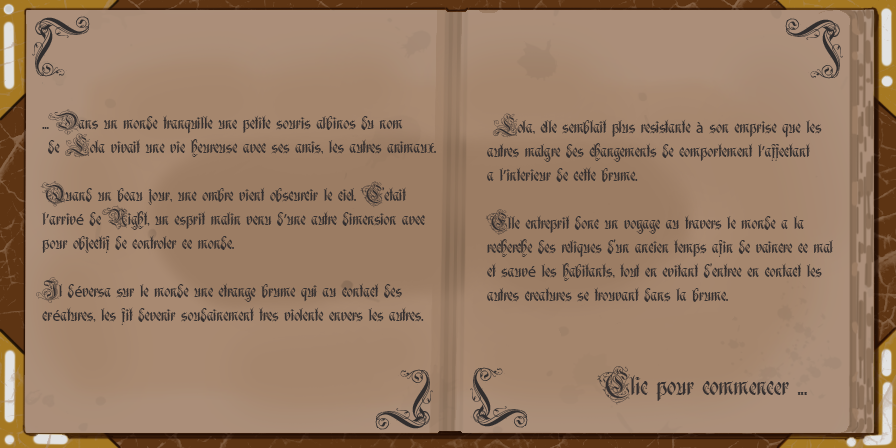
<style>
.page{position:relative;width:896px;height:448px}
.page>*{position:absolute;margin:0}
.t1{font:16px/24px "Ruritania";color:#353030}
.t2{font:16px/24px "MyriadPro-Regular";color:#353030}
.t3{font:24px "Ruritania";color:#353030}
</style>
<div class="page">
<p class="t1" style="left:36px;top:109px;width:400px;height:216px">... Dans un monde tranquille une petite souris albinos du nom<br> de Lola vivait une vie heureuse avec ses amis, les autres animaux.<br><br>Quand un beau jour, une ombre vient obscurcir le ciel. C'etait<br>l<span class="t2">’</span>arriv<span class="t2">é</span> de Night, un esprit malin venu d<span class="t2">’</span>une autre dimension avec <br>pour objectif de controler ce monde. <br><br>Il d<span class="t2">é</span>versa sur le monde une etrange brume qui au contact des<br>cr<span class="t2">é</span>atures, les fit devenir soudainement tres violente envers les autres.</p>
<p class="t1" style="left:485px;top:113px;width:348px;height:189px">Lola, elle semblait plus resistante <span class="t2">à</span> son emprise que les <br>autres malgre des changements de comportement l<span class="t2">’</span>affectant<br>a l<span class="t2">’</span>interieur de cette brume. <br><br>Elle entreprit donc un voyage au travers le monde a la <br>recherche des reliques d'un ancien temps afin de vaincre ce mal <br>et sauv<span class="t2">é</span> les habitants, tout en evitant d'entree en contact les<br>autres creatures se trouvant dans la brume.</p>
<p class="t3" style="left:597px;top:366px;width:210px;height:39px">Clic pour commencer ...</p>
</div>
